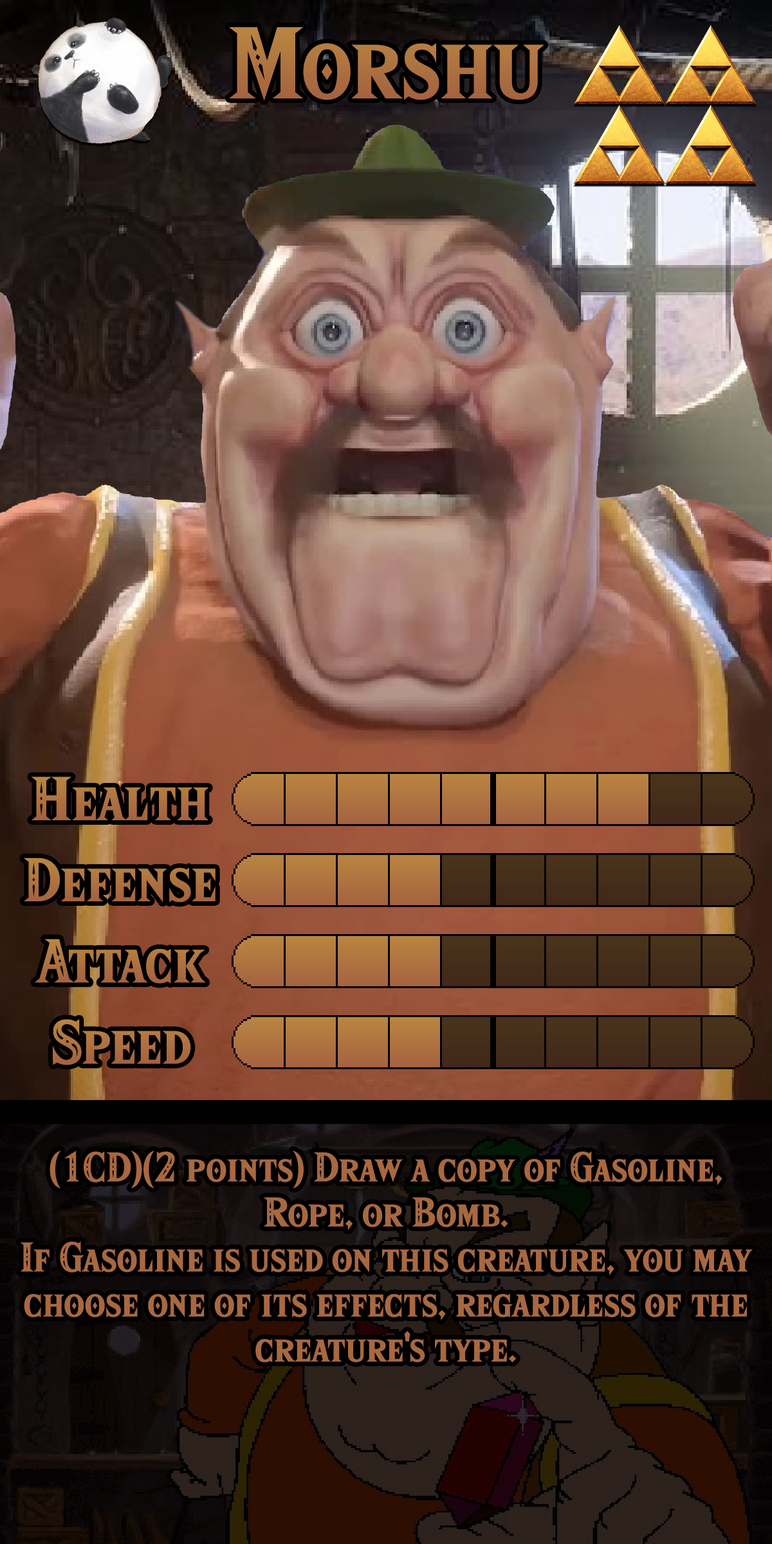
<style>
.page{position:relative;width:772px;height:1544px}
.page>*{position:absolute;margin:0}
.t1{font:152.5px "HyliaSerifBeta-Regular";color:#ad7140}
.t2{font:92.7px "HyliaSerifBeta-Regular";color:#ad7040}
.t3{font:92.7px "HyliaSerifBeta-Regular";color:#ad7140}
.t4{font:62.4px/45px "HyliaSerifBeta-Regular";color:#a86840}
</style>
<div class="page">
<p class="t1" style="left:229px;top:27px;width:315px;height:74px">Morshu</p>
<p class="t2" style="left:32px;top:777px;width:176px;height:43px">Health</p>
<p class="t3" style="left:24px;top:858px;width:192px;height:45px">Defense</p>
<p class="t2" style="left:35px;top:939px;width:171px;height:45px">Attack</p>
<p class="t2" style="left:53px;top:1019px;width:138px;height:47px">Speed</p>
<p class="t4" style="left:20px;top:1151px;width:733px;height:212px;text-align:center">(1CD)(2 points) Draw a copy of Gasoline, Rope, or Bomb.<br>If Gasoline is used on this creature, you may choose one of its effects, regardless of the creature's type.</p>
</div>
